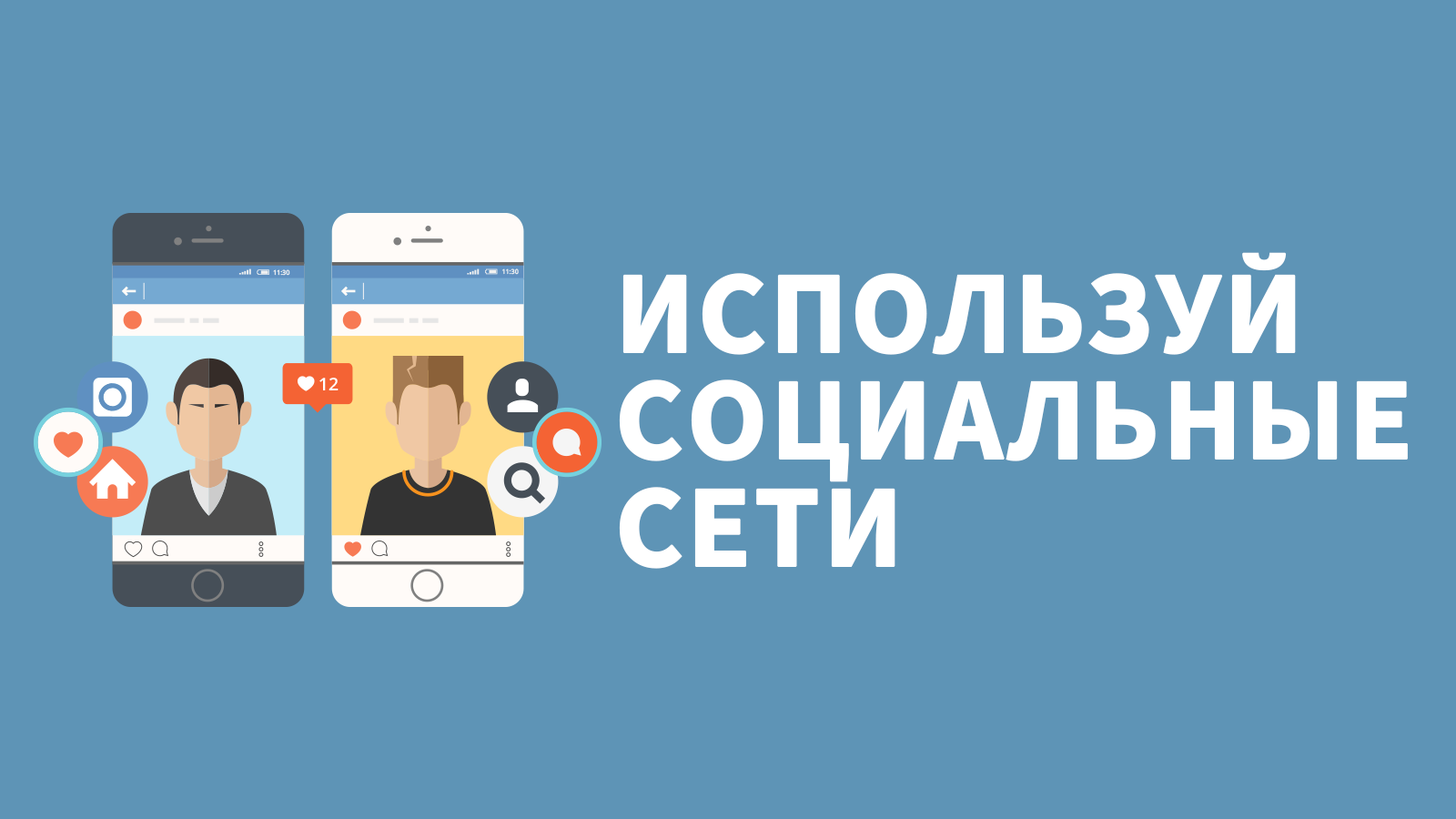
<style>
.page{position:relative;width:1456px;height:819px;background:#5e94b6}
.page>*{position:absolute;margin:0}
.t1{font:117.8px/91px "SourceSansPro-Bold";color:#ffffff;text-transform:uppercase;font-weight:bold}
</style>
<div class="page">
<p class="t1" style="left:619px;top:252px;width:789px;height:317px">используй <br>социальные<br>сети</p>
</div>
